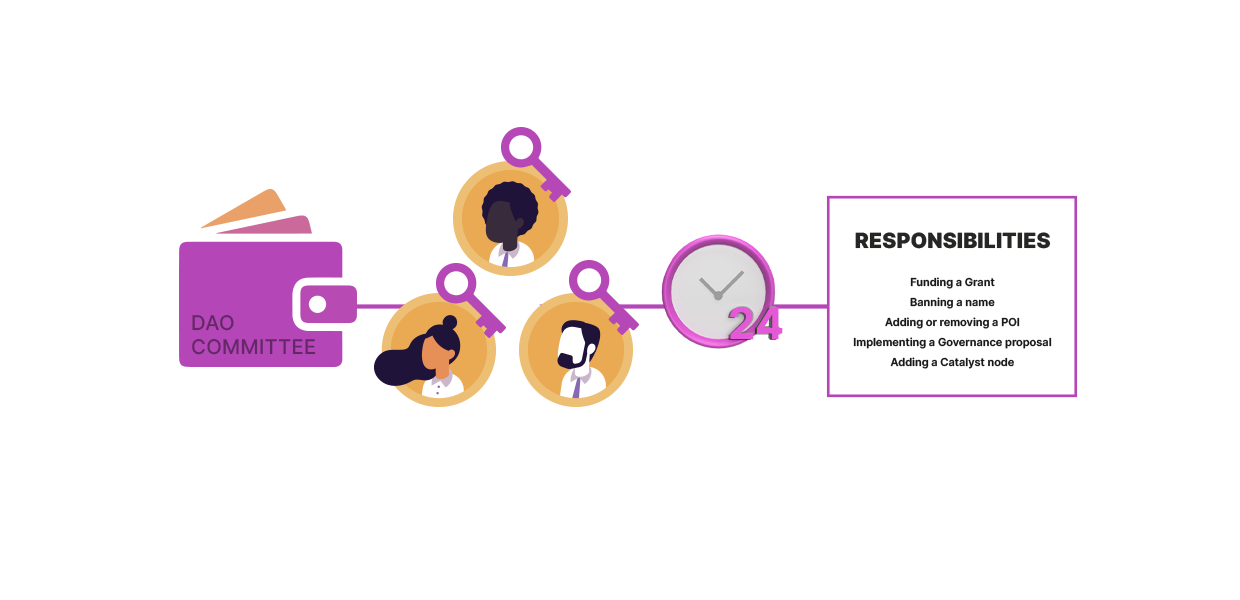
<style>
.page{position:relative;width:1240px;height:600px;background:#ffffff}
.page>*{position:absolute;margin:0}
.t1{font:20.9px "Inter-Black";color:#262625;text-transform:uppercase}
.t2{font:11px/20px "Inter-SemiBold";color:#191919}
.t3{font:12.2px "Inter-SemiBold";color:#191919}
.t4{font:20.3px "Inter-Medium";color:#652867;text-transform:uppercase}
.t5{font:43.4px "Inter-Bold";color:#e558d7;text-transform:uppercase}
</style>
<div class="page">
<p class="t1" style="left:855px;top:232px;width:196px;height:17px">Responsibilities</p>
<p class="t2" style="left:853px;top:277px;width:199px;height:92px;text-align:center">Funding a Grant<br>Banning a name<br>Adding or removing a POI<br>Implementing a Governance proposal<br>Adding a Catalyst node<br><span class="t3"></span></p>
<p class="t4" style="left:192px;top:314px;width:124px;height:41px">DAO <br>Committee</p>
<p class="t5" style="left:730px;top:307px;width:53px;height:32px">24</p>
</div>
